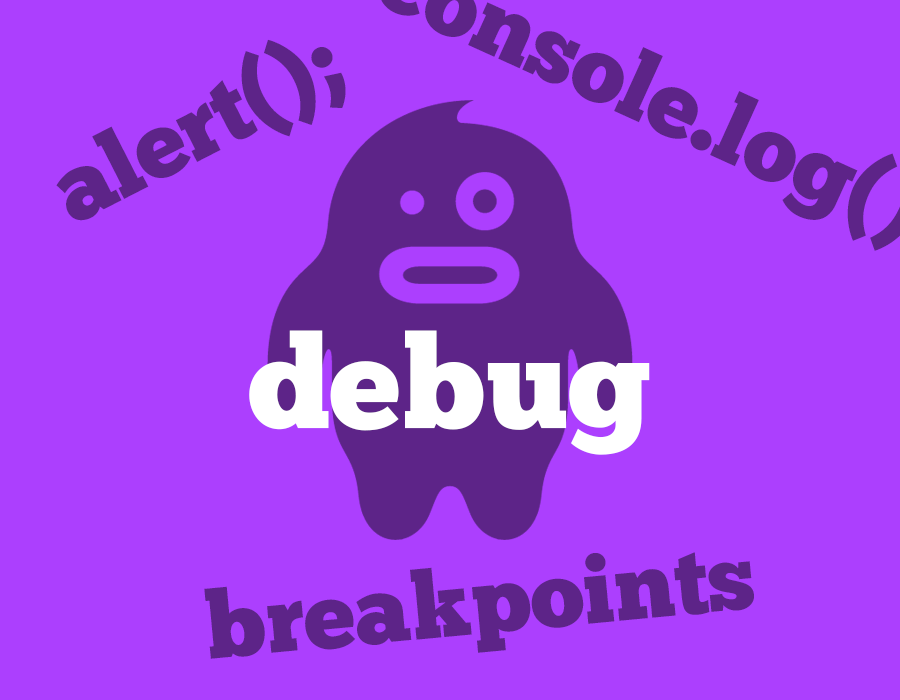
<style>
.page{position:relative;width:900px;height:700px;background:#ac3ffe}
.page>*{position:absolute;margin:0}
.t1{font:93.6px "ChunkFive-Roman";color:#5d2488}
.t2{font:129.9px "ChunkFive-Roman";color:#ffffff}
</style>
<div class="page">
<p class="t1" style="left:56px;top:39px;width:290px;height:182px;rotate:-27deg">alert();</p>
<p class="t2" style="left:249px;top:330px;width:401px;height:125px">debug</p>
<p class="t1" style="left:204px;top:552px;width:550px;height:107px;rotate:-5deg">breakpoints</p>
</div>
